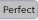
<style>
.page{position:relative;width:38px;height:20px;background:#bfbfbf}
.page>*{position:absolute;margin:0}
.t1{font:10px "MyriadPro-Regular";color:#000000;scale:1.09 1}
</style>
<div class="page">
<p class="t1" style="left:3px;top:5px;width:32px;height:8px">Perfect</p>
</div>
